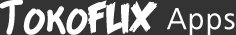
<style>
.page{position:relative;width:236px;height:35px;background:#333333}
.page>*{position:absolute;margin:0}
.t1{font:43px "Exposition";letter-spacing:0.01em;color:#ffffff;font-weight:bold}
.t2{font:43px "FeastofFleshBB";letter-spacing:0.01em;color:#ffffff;font-weight:bold}
.t3{font:30px "Humanist777BT-LightB";letter-spacing:0.01em;color:#ffffff;font-weight:bold}
</style>
<div class="page">
<p class="t1" style="left:0px;top:0px;width:158px;height:35px">Toko<span class="t2">Flix</span></p>
<p class="t3" style="left:167px;top:8px;width:68px;height:28px">Apps</p>
</div>
